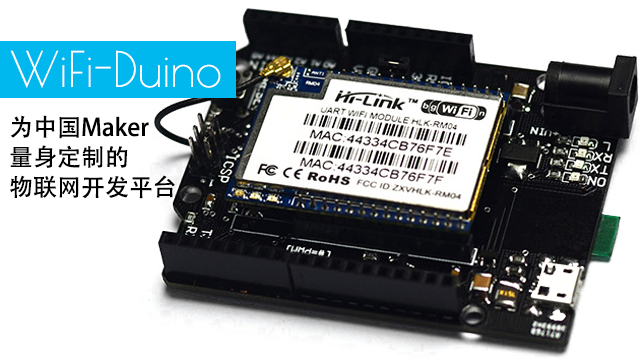
<style>
.page{position:relative;width:640px;height:360px;background:#ffffff}
.page>*{position:absolute;margin:0}
.t1{font:48px "PoiretOne-Regular";color:#ffffff}
.t2{font:24px/30px "AdobeHeitiStd-Regular";color:#000000}
</style>
<div class="page">
<p class="t1" style="left:10px;top:50px;width:211px;height:38px">WiFi-Duino</p>
<p class="t2" style="left:10px;top:115px;width:165px;height:84px">为中国Maker<br>量身定制的<br>物联网开发平台</p>
</div>
